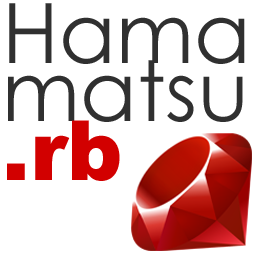
<style>
.page{position:relative;width:256px;height:256px;background:#ffffff}
.page>*{position:absolute;margin:0}
.t1{font:83.3px/58.3px "CenturyGothic";color:#303030}
.t2{font:83.3px/58.3px "Arial-Black";color:#d20000}
</style>
<div class="page">
<p class="t1" style="left:7px;top:3px;width:238px;height:178px">Hama<br>matsu<br><span class="t2">.rb</span></p>
</div>
